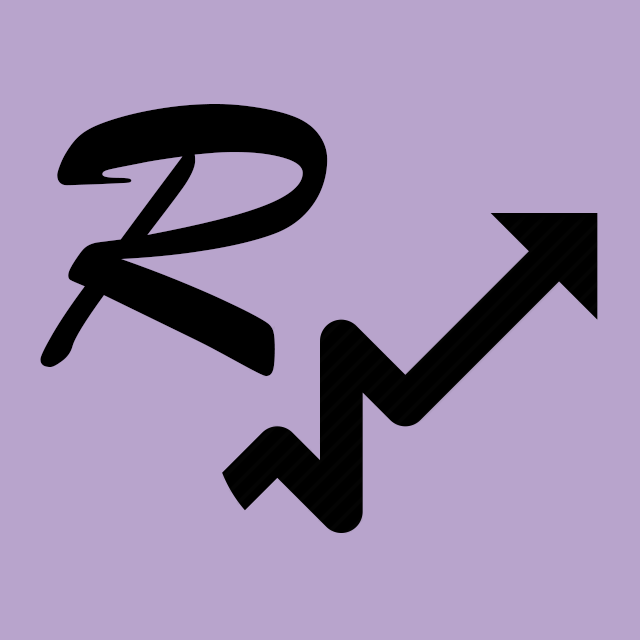
<style>
.page{position:relative;width:640px;height:640px;background:#b8a4cc}
.page>*{position:absolute;margin:0}
.t1{font:400px "BrushScriptMT";color:#000000}
</style>
<div class="page">
<p class="t1" style="left:40px;top:104px;width:288px;height:272px">R</p>
</div>
